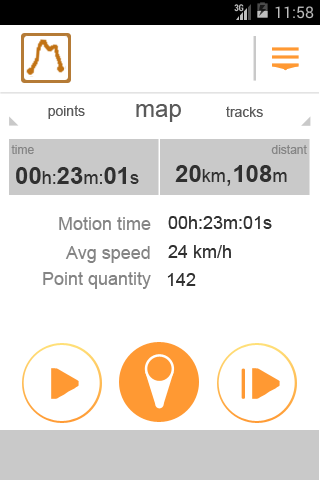
<style>
.page{position:relative;width:320px;height:480px;background:#ffffff}
.page>*{position:absolute;margin:0}
.t1{font:14px "ArialMT";color:#5a5a5a}
.t2{font:24px "ArialMT";color:#5a5a5a}
.t3{font:12px "ArialMT";color:#848484}
.t4{font:24px "Arial-BoldMT";color:#303030}
.t5{font:18px "ArialMT";color:#303030}
.t6{font:24px "ArialMT";color:#303030}
.t7{font:18px "ArialMT";color:#848484}
</style>
<div class="page">
<p class="t1" style="left:48px;top:105px;width:37px;height:14px">points</p>
<p class="t2" style="left:136px;top:104px;width:45px;height:18px">map</p>
<p class="t1" style="left:226px;top:106px;width:37px;height:11px">tracks</p>
<p class="t3" style="left:11px;top:145px;width:23px;height:9px">time</p>
<p class="t3" style="left:271px;top:145px;width:36px;height:9px">distant</p>
<p class="t4" style="left:16px;top:167px;width:123px;height:17px">00<span class="t5">h:</span>23<span class="t5">m:</span>01<span class="t5">s</span></p>
<p class="t4" style="left:175px;top:165px;width:112px;height:21px">20<span class="t5">km</span><span class="t6">,</span>108<span class="t5">m</span></p>
<p class="t7" style="left:59px;top:217px;width:92px;height:13px">Motion time</p>
<p class="t5" style="left:168px;top:216px;width:104px;height:13px">00h:23m:01s</p>
<p class="t7" style="left:65px;top:246px;width:85px;height:17px">Avg speed</p>
<p class="t5" style="left:168px;top:245px;width:63px;height:13px">24 km/h</p>
<p class="t7" style="left:43px;top:272px;width:108px;height:17px">Point quantity</p>
<p class="t5" style="left:167px;top:273px;width:29px;height:13px">142</p>
</div>
